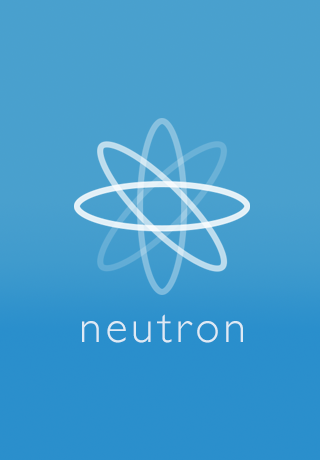
<style>
.page{position:relative;width:320px;height:460px;background:#49a0ce}
.page>*{position:absolute;margin:0}
.t1{font:45.5px "GillSans-Light";letter-spacing:0.1em;color:#deeaf5}
</style>
<div class="page">
<p class="t1" style="left:82px;top:314px;width:161px;height:29px">neutron</p>
</div>
